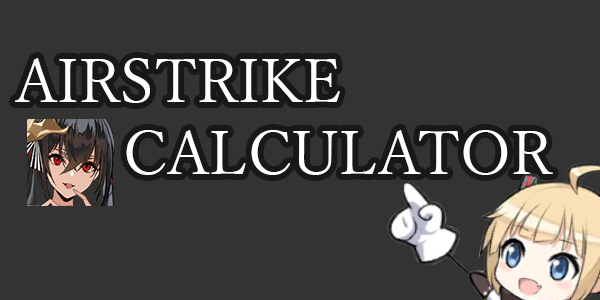
<style>
.page{position:relative;width:600px;height:300px;background:#333333}
.page>*{position:absolute;margin:0}
.t1{font:60px "YuMincho-Regular";color:#ffffff}
</style>
<div class="page">
<p class="t1" style="left:15px;top:58px;width:538px;height:117px">AIRSTRIKE<br>   CALCULATOR</p>
</div>
